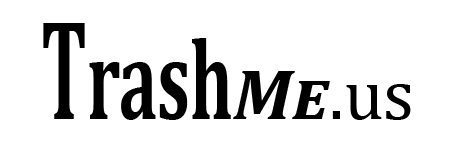
<style>
.page{position:relative;width:454px;height:160px;background:#ffffff}
.page>*{position:absolute;margin:0}
.t1{font:115.2px "Cambria-Bold";color:#000000;scale:0.62 1}
.t2{font:144px "Cambria-Bold";color:#000000;scale:0.5 1}
.t3{font:72px "Cambria-BoldItalic";color:#000000;font-variant:small-caps}
.t4{font:72px "Cambria";color:#000000}
</style>
<div class="page">
<p class="t1" style="left:43px;top:23px;width:368px;height:97px"><span class="t2">T</span>rash<span class="t3">Me</span><span class="t4">.us</span></p>
</div>
